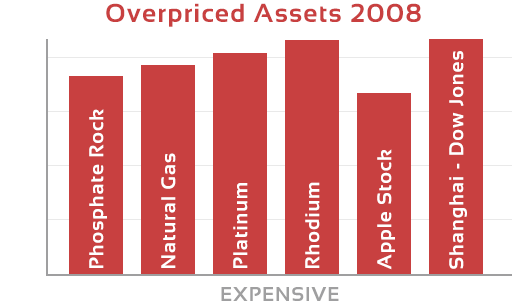
<style>
.page{position:relative;width:512px;height:308px;background:#ffffff}
.page>*{position:absolute;margin:0}
.t1{font:26px "Sansation-Bold";letter-spacing:0.05em;color:#c84040}
.t2{font:20px "Sansation-Bold";letter-spacing:0.05em;color:#ffffff}
.t3{font:20px "Sansation-Bold";letter-spacing:0.05em;color:#9f9fa0}
</style>
<div class="page">
<p class="t1" style="left:106px;top:3px;width:315px;height:24px">Overpriced Assets 2008</p>
<p class="t2" style="left:449px;top:51px;width:18px;height:218px;rotate:-90deg">Shanghai - Dow Jones</p>
<p class="t2" style="left:89px;top:109px;width:18px;height:159px;rotate:-90deg">Phosphate Rock</p>
<p class="t2" style="left:377px;top:149px;width:18px;height:121px;rotate:-90deg">Apple Stock</p>
<p class="t2" style="left:161px;top:153px;width:15px;height:115px;rotate:-90deg">Natural Gas</p>
<p class="t2" style="left:233px;top:183px;width:15px;height:85px;rotate:-90deg">Platinum</p>
<p class="t2" style="left:305px;top:182px;width:15px;height:86px;rotate:-90deg">Rhodium</p>
<p class="t3" style="left:221px;top:287px;width:118px;height:14px">EXPENSIVE</p>
</div>
